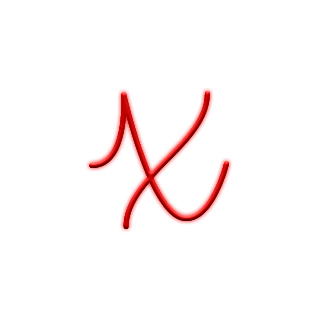
<style>
.page{position:relative;width:320px;height:320px;background:#ffffff}
.page>*{position:absolute;margin:0}
.t1{font:120px "BetterTogetherDemo"}
</style>
<div class="page">
<p class="t1" style="left:89px;top:91px;width:140px;height:138px">X</p>
</div>
